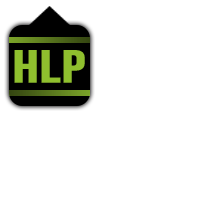
<style>
.page{position:relative;width:200px;height:200px;background:#ffffff}
.page>*{position:absolute;margin:0}
.t1{font:45.6px "BebasNeueBold";color:#8fbf2e;font-weight:bold;scale:1.31 1}
</style>
<div class="page">
<p class="t1" style="left:14px;top:50px;width:71px;height:33px">HLP</p>
</div>
